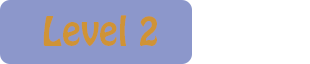
<style>
.page{position:relative;width:310px;height:64px;background:#8c97cb}
.page>*{position:absolute;margin:0}
.t1{font:36px "HoboStd";color:#cf9336}
</style>
<div class="page">
<p class="t1" style="left:43px;top:15px;width:114px;height:31px">Level 2</p>
</div>
